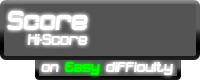
<style>
.page{position:relative;width:200px;height:80px;background:#545454}
.page>*{position:absolute;margin:0}
.t1{font:28.8px "Dopenakedfoulphatrelaxed";color:#ffffff}
.t2{font:16.2px "Dopenakedfoulphatrelaxed";color:#ffffff}
.t3{font:15.3px "Dopenakedfoulphatrelaxed";color:#ffffff}
.t4{font:15.3px "Dopenakedfoulphatrelaxed";color:#00ff00}
</style>
<div class="page">
<p class="t1" style="left:7px;top:11px;width:81px;height:19px">Score</p>
<p class="t2" style="left:27px;top:34px;width:61px;height:11px">Hi-Score</p>
<p class="t3" style="left:41px;top:62px;width:132px;height:13px">on       difficulty</p>
<p class="t4" style="left:65px;top:62px;width:35px;height:13px"><span class="t3">   </span>Easy</p>
</div>
